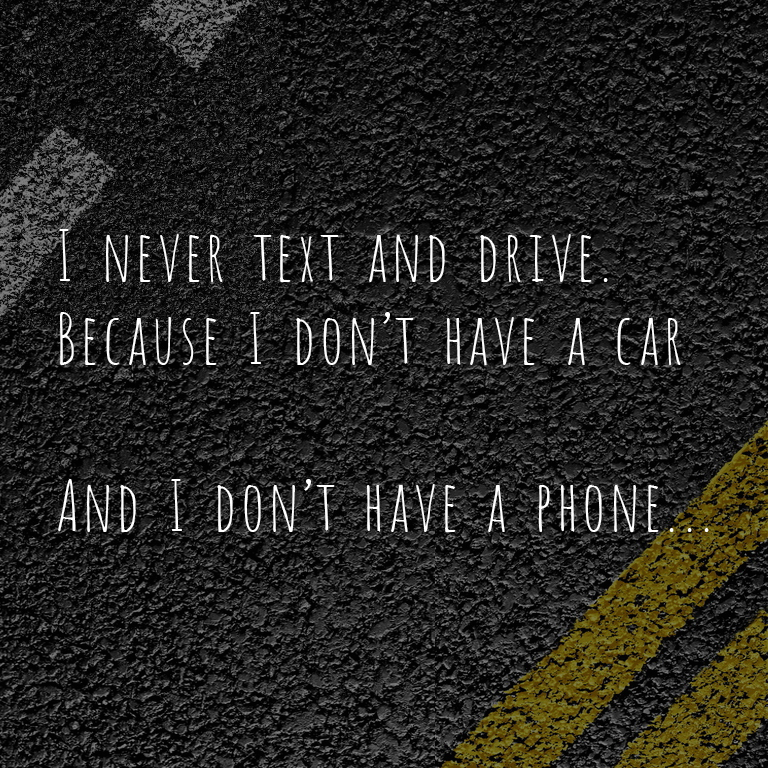
<style>
.page{position:relative;width:768px;height:768px}
.page>*{position:absolute;margin:0}
.t1{font:69.4px "Amatic";color:#ffffff}
</style>
<div class="page">
<p class="t1" style="left:58px;top:229px;width:651px;height:303px">I never text and drive.<br>Because I don’t have a car<br><br>And I don’t have a phone...</p>
</div>
